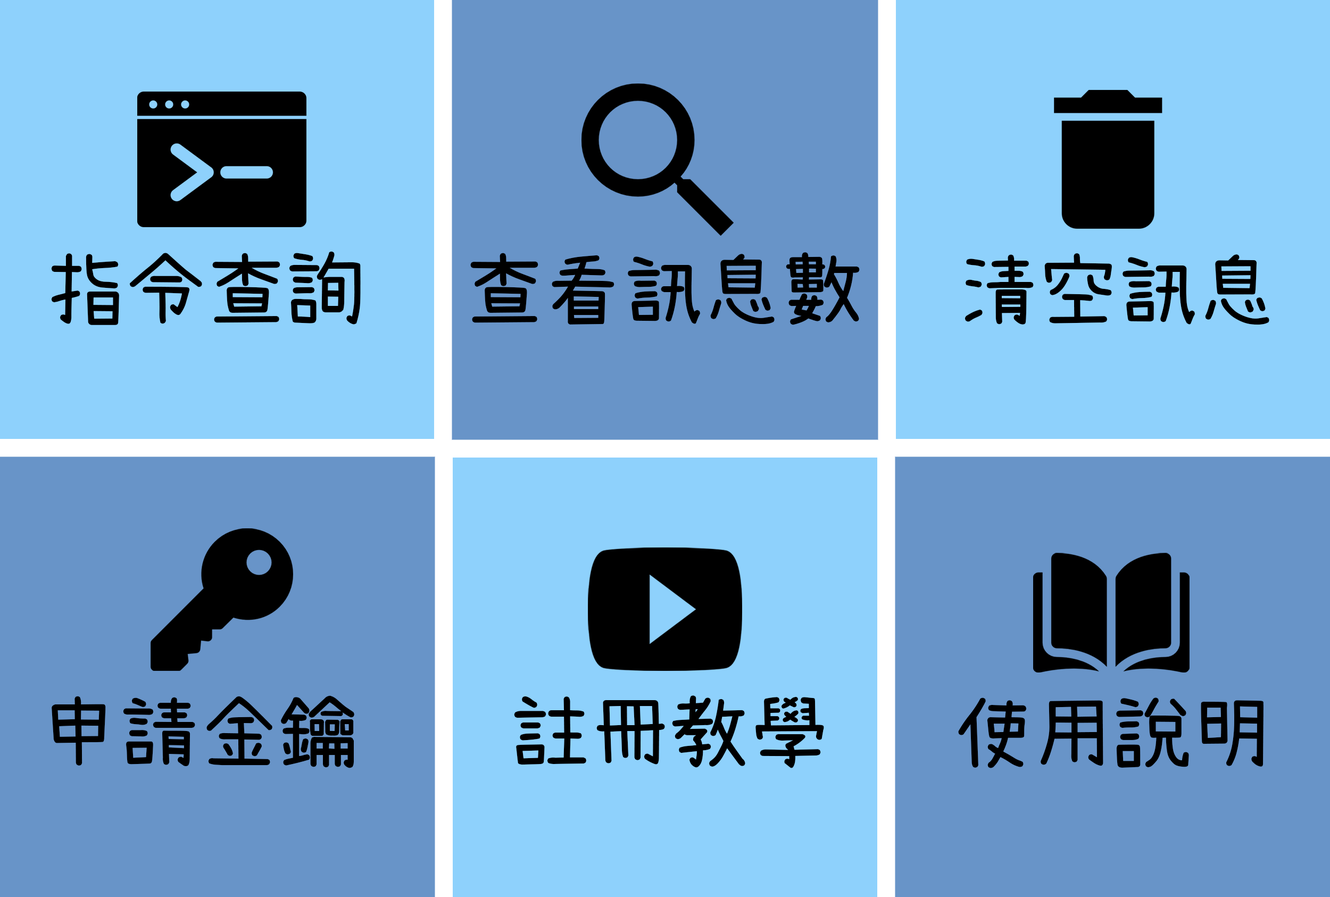
<style>
.page{position:relative;width:1330px;height:897px;background:#6894c8}
.page>*{position:absolute;margin:0}
.t1{font:79.8px "SetoFont";color:#000000}
</style>
<div class="page">
<p class="t1" style="left:51px;top:251px;width:310px;height:74px">指令查詢</p>
<p class="t1" style="left:470px;top:252px;width:390px;height:73px">查看訊息數</p>
<p class="t1" style="left:965px;top:253px;width:304px;height:72px">清空訊息</p>
<p class="t1" style="left:52px;top:695px;width:302px;height:73px">申請金鑰</p>
<p class="t1" style="left:514px;top:695px;width:310px;height:73px">註冊教學</p>
<p class="t1" style="left:958px;top:697px;width:305px;height:71px">使用說明</p>
</div>
